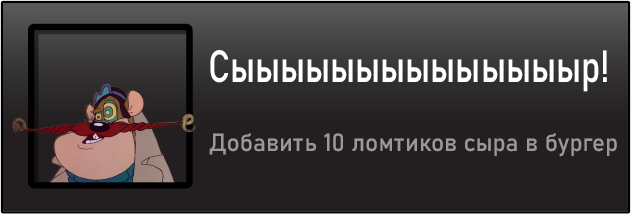
<style>
.page{position:relative;width:631px;height:214px;background:#231f20}
.page>*{position:absolute;margin:0}
.t1{font:44.4px "Bahnschrift";color:#ffffff;scale:0.81 1}
.t2{font:24.6px "Bahnschrift";color:#999999}
</style>
<div class="page">
<p class="t1" style="left:210px;top:50px;width:397px;height:42px">Сыыыыыыыыыыыыыыр!</p>
<p class="t2" style="left:209px;top:133px;width:408px;height:24px">Добавить 10 ломтиков сыра в бургер</p>
</div>
